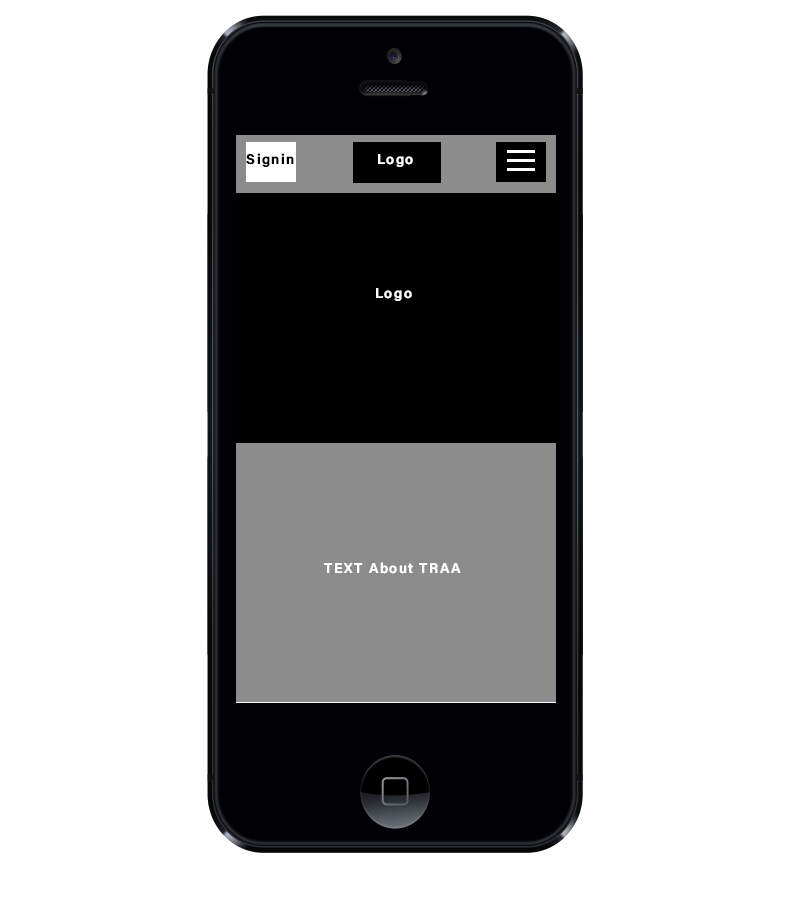
<style>
.page{position:relative;width:800px;height:900px;background:#ffffff}
.page>*{position:absolute;margin:0}
.t1{font:14px "AcuminConcept-Semibold";letter-spacing:0.1em;color:#000000}
.t2{font:14px "AcuminConcept-Semibold";letter-spacing:0.1em;color:#ffffff}
</style>
<div class="page">
<p class="t1" style="left:246px;top:153px;width:48px;height:14px">Signin</p>
<p class="t2" style="left:378px;top:154px;width:35px;height:13px">Logo</p>
<p class="t2" style="left:376px;top:288px;width:36px;height:13px">Logo</p>
<p class="t2" style="left:324px;top:562px;width:137px;height:12px">TEXT About TRAA</p>
</div>
